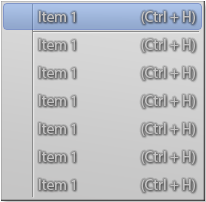
<style>
.page{position:relative;width:206px;height:202px}
.page>*{position:absolute;margin:0}
.t1{font:15px "MyriadPro-Regular";color:#d7d6d6}
.t2{font:12px "MyriadPro-Regular";color:#3a3a3a}
</style>
<div class="page">
<p class="t1" style="left:39px;top:11px;width:36px;height:11px"><span class="t2"><br></span>Item 1</p>
<p class="t1" style="left:141px;top:11px;width:54px;height:13px"><span class="t2"><br></span>(Ctrl + H)</p>
<p class="t1" style="left:39px;top:95px;width:36px;height:11px"><span class="t2"><br></span>Item 1</p>
<p class="t1" style="left:141px;top:95px;width:54px;height:13px"><span class="t2"><br></span>(Ctrl + H)</p>
<p class="t1" style="left:39px;top:123px;width:36px;height:11px"><span class="t2"><br></span>Item 1</p>
<p class="t1" style="left:141px;top:123px;width:54px;height:13px"><span class="t2"><br></span>(Ctrl + H)</p>
<p class="t1" style="left:39px;top:151px;width:36px;height:11px"><span class="t2"><br></span>Item 1</p>
<p class="t1" style="left:141px;top:151px;width:54px;height:13px"><span class="t2"><br></span>(Ctrl + H)</p>
<p class="t1" style="left:39px;top:179px;width:36px;height:11px"><span class="t2"><br></span>Item 1</p>
<p class="t1" style="left:141px;top:179px;width:54px;height:13px"><span class="t2"><br></span>(Ctrl + H)</p>
</div>
